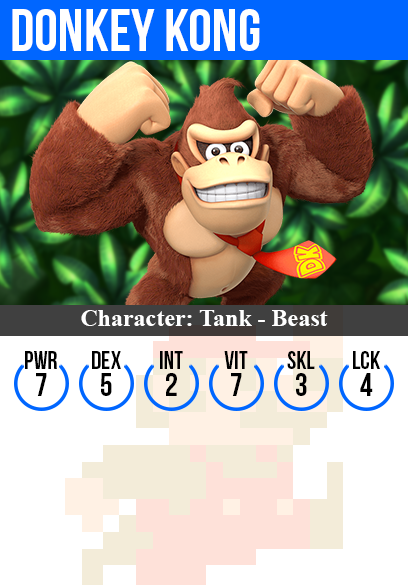
<style>
.page{position:relative;width:408px;height:585px;background:#ffffff}
.page>*{position:absolute;margin:0}
.t1{font:60px "BebasNeue";color:#ffffff}
.t2{font:24px "TimesNewRomanPS-BoldMT";color:#ffffff}
.t3{font:25px "BebasNeue";color:#000000}
.t4{font:32px "BebasNeue";color:#000000}
</style>
<div class="page">
<p class="t1" style="left:12px;top:9px;width:248px;height:42px">donkey kong</p>
<p class="t2" style="left:81px;top:310px;width:247px;height:16px">Character: Tank - Beast</p>
<p class="t3" style="left:25px;top:351px;width:32px;height:18px">PWR</p>
<p class="t3" style="left:92px;top:351px;width:29px;height:18px">dex</p>
<p class="t3" style="left:160px;top:351px;width:23px;height:18px">int</p>
<p class="t3" style="left:224px;top:351px;width:24px;height:18px">vit</p>
<p class="t3" style="left:287px;top:351px;width:28px;height:18px">skl</p>
<p class="t3" style="left:353px;top:351px;width:27px;height:18px">lck</p>
<p class="t4" style="left:36px;top:373px;width:11px;height:23px">7</p>
<p class="t4" style="left:101px;top:373px;width:11px;height:23px">5</p>
<p class="t4" style="left:166px;top:373px;width:11px;height:23px">2</p>
<p class="t4" style="left:231px;top:373px;width:11px;height:23px">7</p>
<p class="t4" style="left:296px;top:373px;width:11px;height:23px">3</p>
<p class="t4" style="left:360px;top:373px;width:13px;height:23px">4</p>
</div>
